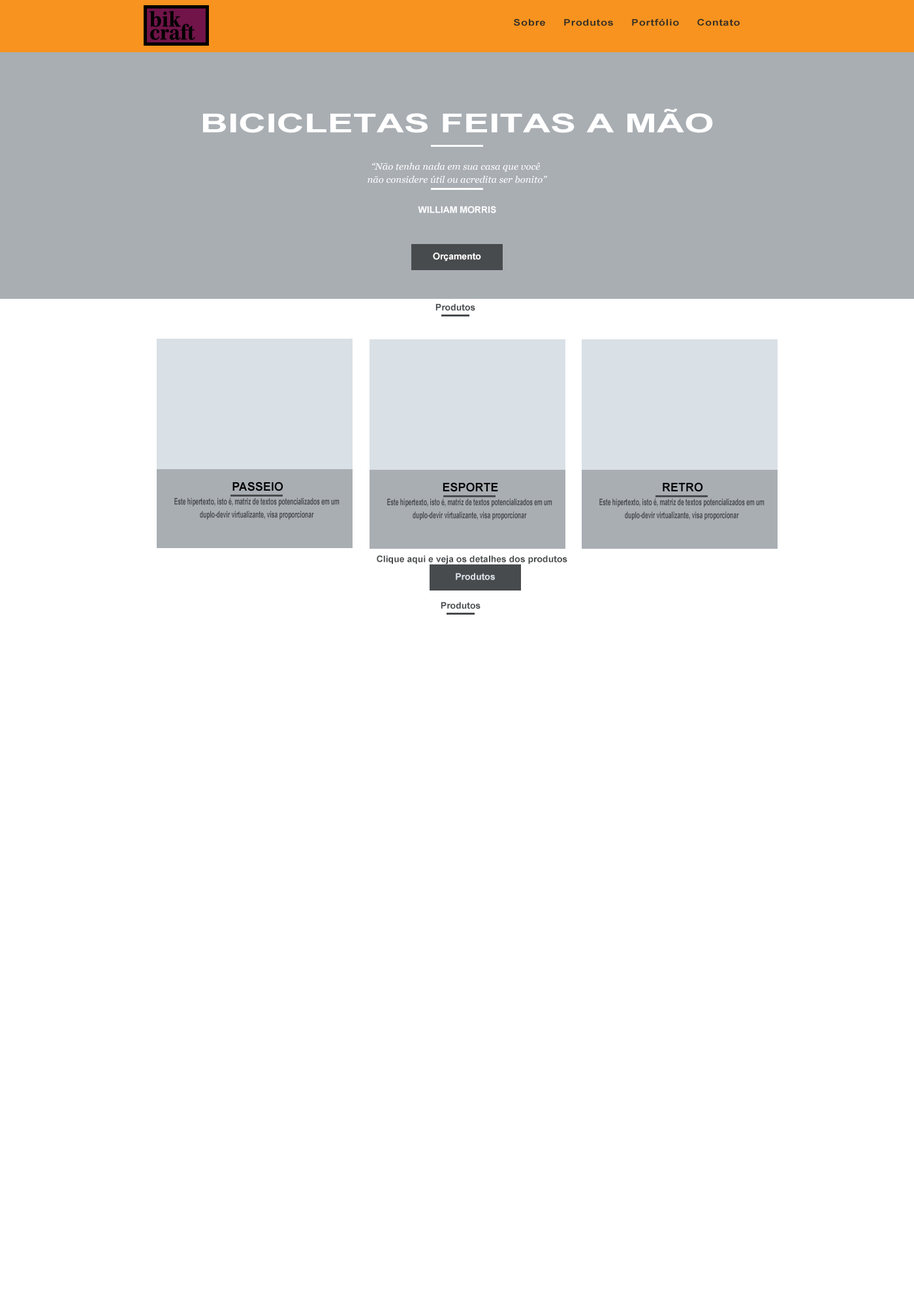
<style>
.page{position:relative;width:914px;height:1305px;background:#ffffff}
.page>*{position:absolute;margin:0}
.t1{font:9.1px "Arial-BoldMT";letter-spacing:0.05em;color:#363026;scale:1.16 1}
.t2{font:26px "Arial-BoldMT";color:#ffffff;text-transform:uppercase;scale:1.47 1}
.t3{font:9.1px/13.1px "Georgia-Italic";color:#ffffff;scale:1.06 1}
.t4{font:9.1px "Arial-BoldMT";color:#ffffff}
.t5{font:9.1px "Arial-BoldMT";color:#484b4d}
.t6{font:11.7px "Arial-BoldMT";color:#000000;text-transform:uppercase}
.t7{font:9.1px/13.1px "Arial-BoldMT";color:#484b4d;scale:0.61 1}
.t8{font:9.1px "Arial-BoldMT";color:#d9e0e6}
</style>
<div class="page">
<p class="t1" style="left:514px;top:19px;width:225px;height:7px">Sobre     Produtos     Portfólio     Contato</p>
<p class="t2" style="left:203px;top:108px;width:510px;height:25px">BICICLETAS FEITAS A MÃO</p>
<p class="t3" style="left:367px;top:162px;width:180px;height:21px;text-align:center">“Não tenha nada em sua casa que você <br>não considere útil ou acredita ser bonito”</p>
<p class="t4" style="left:418px;top:206px;width:78px;height:7px">WILLIAM MORRIS</p>
<p class="t4" style="left:433px;top:253px;width:48px;height:8px">Orçamento</p>
<p class="t5" style="left:435px;top:303px;width:40px;height:8px">Produtos</p>
<p class="t6" style="left:232px;top:482px;width:51px;height:9px">passeio</p>
<p class="t6" style="left:442px;top:482px;width:56px;height:10px">ESPORTE</p>
<p class="t6" style="left:662px;top:482px;width:41px;height:10px">RETRO</p>
<p class="t7" style="left:174px;top:498px;width:165px;height:21px;text-align:center">Este hipertexto, isto é, matriz de textos potencializados em um duplo-devir virtualizante, visa proporcionar</p>
<p class="t7" style="left:387px;top:499px;width:165px;height:21px;text-align:center">Este hipertexto, isto é, matriz de textos potencializados em um duplo-devir virtualizante, visa proporcionar</p>
<p class="t7" style="left:599px;top:499px;width:165px;height:21px;text-align:center">Este hipertexto, isto é, matriz de textos potencializados em um duplo-devir virtualizante, visa proporcionar</p>
<p class="t5" style="left:377px;top:555px;width:190px;height:9px">Clique aqui e veja os detalhes dos produtos</p>
<p class="t8" style="left:456px;top:573px;width:39px;height:7px">Produtos</p>
<p class="t5" style="left:440px;top:602px;width:40px;height:7px">Produtos</p>
</div>
